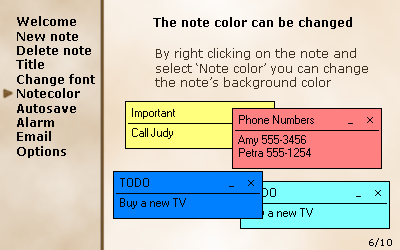
<style>
.page{position:relative;width:400px;height:250px}
.page>*{position:absolute;margin:0}
.t1{font:12px "Verdana-Bold";color:#010101}
.t2{font:12px "Verdana-Bold";color:#000000}
.t3{font:12px "Verdana";color:#3b3022}
.t4{font:9px "Verdana";color:#000000}
</style>
<div class="page">
<p class="t1" style="left:16px;top:16px;width:79px;height:142px">Welcome<br>New note<br>Delete note<br>Title<br>Change font<br>Notecolor<br>Autosave<br>Alarm<br>Email<br>Options</p>
<p class="t2" style="left:153px;top:17px;width:199px;height:12px">The note color can be changed</p>
<p class="t3" style="left:155px;top:48px;width:213px;height:41px">By right clicking on the note and<br>select ‘Note color’ you can change<br>the note’s background color</p>
<p class="t4" style="left:369px;top:238px;width:23px;height:9px">6/10</p>
</div>
